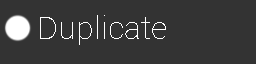
<style>
.page{position:relative;width:256px;height:64px;background:#333333}
.page>*{position:absolute;margin:0}
.t1{font:32px "Roboto-Thin";color:#ffffff}
</style>
<div class="page">
<p class="t1" style="left:40px;top:15px;width:126px;height:30px">Duplicate</p>
</div>
